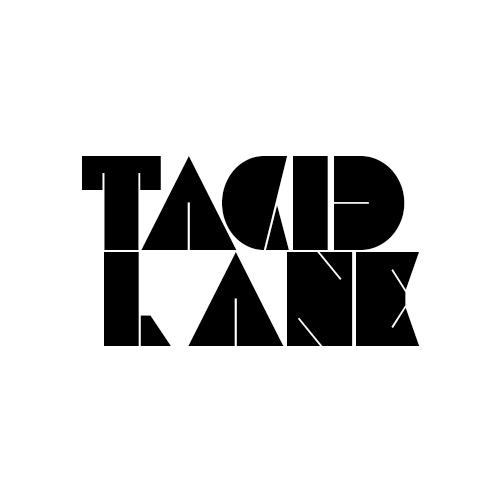
<style>
.page{position:relative;width:500px;height:500px;background:#ffffff}
.page>*{position:absolute;margin:0}
.t1{font:116.7px "Ali";color:#000000}
</style>
<div class="page">
<p class="t1" style="left:82px;top:156px;width:79px;height:94px">t</p>
<p class="t1" style="left:141px;top:156px;width:96px;height:94px">a</p>
<p class="t1" style="left:222px;top:156px;width:67px;height:94px">c</p>
<p class="t1" style="left:293px;top:156px;width:35px;height:94px">i</p>
<p class="t1" style="left:334px;top:156px;width:71px;height:94px">d</p>
<p class="t1" style="left:104px;top:252px;width:67px;height:94px">l</p>
<p class="t1" style="left:188px;top:252px;width:96px;height:94px">a</p>
<p class="t1" style="left:287px;top:252px;width:66px;height:94px">n</p>
<p class="t1" style="left:356px;top:252px;width:64px;height:94px">e</p>
</div>
